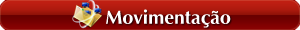
<style>
.page{position:relative;width:300px;height:30px}
.page>*{position:absolute;margin:0}
.t1{font:29.7px "IrisUPCBold";color:#ffffff}
</style>
<div class="page">
<p class="t1" style="left:106px;top:9px;width:125px;height:19px">Movimentação</p>
</div>
